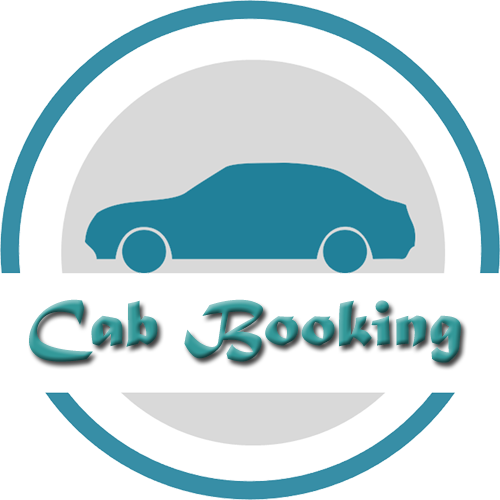
<style>
.page{position:relative;width:500px;height:500px;background:#ffffff}
.page>*{position:absolute;margin:0}
.t1{font:68.1px "MaturaMTScriptCapitals";scale:1.07 1}
</style>
<div class="page">
<p class="t1" style="left:29px;top:299px;width:432px;height:64px">Cab Booking</p>
</div>
